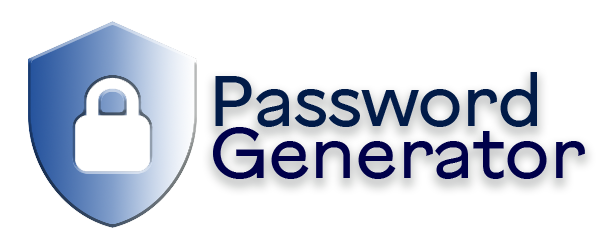
<style>
.page{position:relative;width:600px;height:250px;background:#ffffff}
.page>*{position:absolute;margin:0}
.t1{font:72px "VinnytsiaSans-Regular";color:#011b48}
.t2{font:72px "VinnytsiaSans-Regular";color:#00004a}
</style>
<div class="page">
<p class="t1" style="left:215px;top:72px;width:322px;height:55px">Password</p>
<p class="t2" style="left:213px;top:127px;width:372px;height:52px">Generator</p>
</div>
